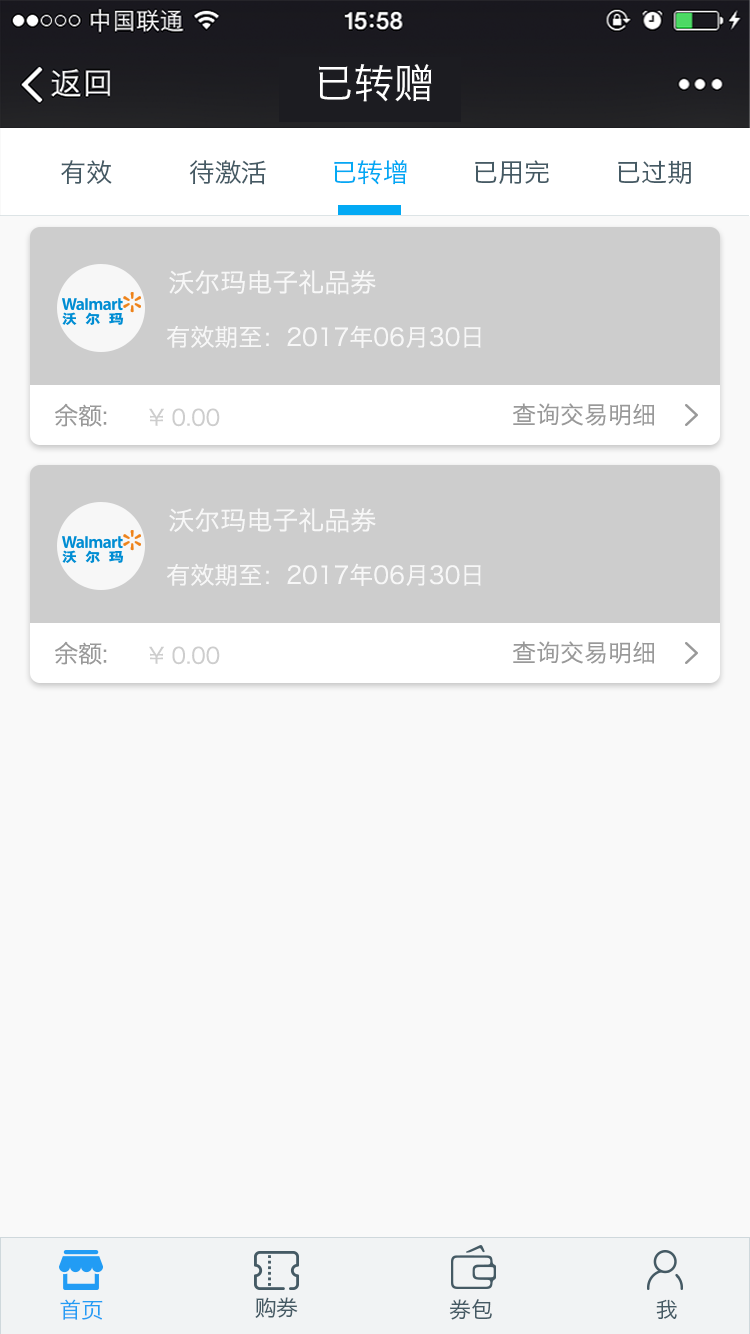
<style>
.page{position:relative;width:750px;height:1334px;background:#f9f9f9}
.page>*{position:absolute;margin:0}
.t1{font:40px "HiraginoSansGB-W3";color:#ffffff}
.t2{font:26px "HiraginoSansGB-W3";color:#455a64}
.t3{font:26px "HiraginoSansGB-W3";color:#03a9f4}
.t4{font:26px "HiraginoSansGB-W3";color:#f7f7f7}
.t5{font:24px "HiraginoSansGB-W3";color:#f7f7f7}
.t6{font:24px "HiraginoSansGB-W3";color:#999999}
.t7{font:22px "HiraginoSansGB-W3";color:#cdcdcd}
.t8{font:21.9px "HiraginoSansGB-W3";color:#229cf4}
.t9{font:22px "HiraginoSansGB-W3";color:#455a64}
.t10{font:22.1px "HiraginoSansGB-W3";color:#455a64}
</style>
<div class="page">
<p class="t1" style="left:319px;top:64px;width:113px;height:38px">已转赠</p>
<p class="t2" style="left:61px;top:160px;width:51px;height:24px">有效</p>
<p class="t2" style="left:189px;top:160px;width:77px;height:25px">待激活</p>
<p class="t3" style="left:334px;top:160px;width:73px;height:25px">已转增</p>
<p class="t2" style="left:475px;top:160px;width:74px;height:24px">已用完</p>
<p class="t2" style="left:618px;top:160px;width:73px;height:24px">已过期</p>
<p class="t4" style="left:169px;top:270px;width:207px;height:25px">沃尔玛电子礼品券</p>
<p class="t5" style="left:167px;top:325px;width:314px;height:23px">有效期至：2017年06月30日</p>
<p class="t6" style="left:55px;top:403px;width:52px;height:24px">余额:</p>
<p class="t7" style="left:149px;top:408px;width:71px;height:19px">¥ 0.00</p>
<p class="t6" style="left:513px;top:403px;width:141px;height:23px">查询交易明细</p>
<p class="t4" style="left:169px;top:508px;width:207px;height:25px">沃尔玛电子礼品券</p>
<p class="t5" style="left:167px;top:563px;width:314px;height:23px">有效期至：2017年06月30日</p>
<p class="t6" style="left:55px;top:641px;width:52px;height:24px">余额:</p>
<p class="t6" style="left:513px;top:641px;width:141px;height:23px">查询交易明细</p>
<p class="t7" style="left:149px;top:646px;width:71px;height:19px">¥ 0.00</p>
<p class="t8" style="left:60px;top:1299px;width:43px;height:21px">首页</p>
<p class="t9" style="left:255px;top:1297px;width:43px;height:21px">购券</p>
<p class="t9" style="left:449px;top:1299px;width:43px;height:21px">券包</p>
<p class="t10" style="left:656px;top:1299px;width:21px;height:20px">我</p>
</div>
